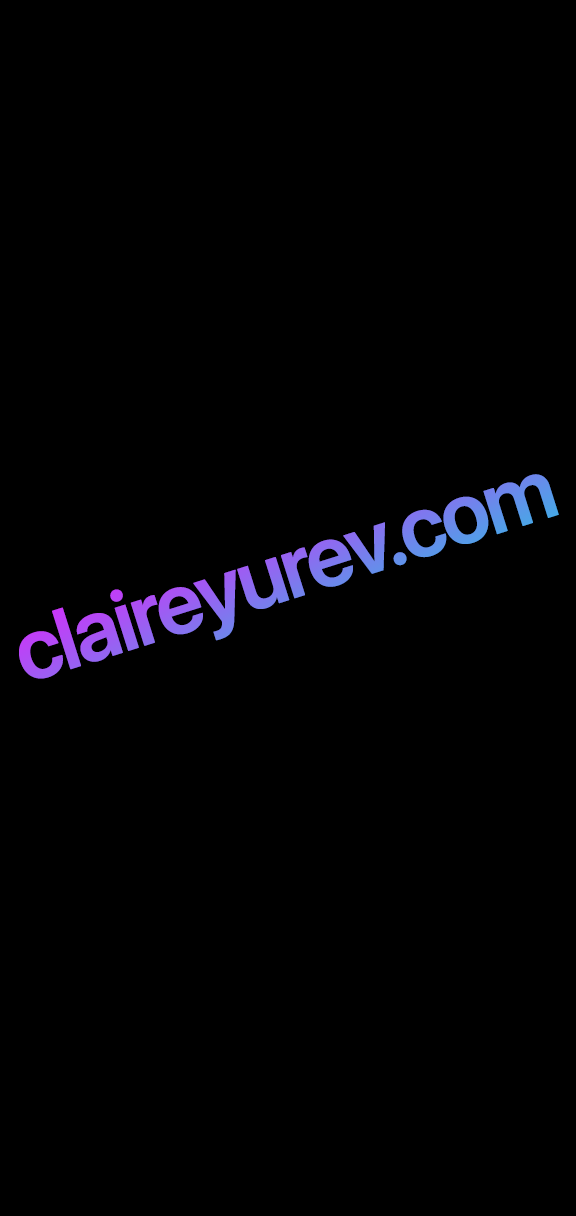
<style>
.page{position:relative;width:576px;height:1216px;background:#000000}
.page>*{position:absolute;margin:0}
.t1{font:86px "SFProDisplay-Semibold";letter-spacing:-0.04em;font-weight:bold}
</style>
<div class="page">
<p class="t1" style="left:19px;top:474px;width:540px;height:205px;rotate:-18deg">claireyurev.com</p>
</div>
